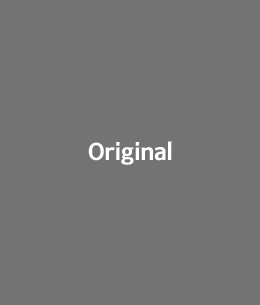
<style>
.page{position:relative;width:260px;height:305px;background:#737373}
.page>*{position:absolute;margin:0}
.t1{font:25px "TTHayanbaramR";letter-spacing:-0.025em;color:#ffffff;scale:0.95 1}
</style>
<div class="page">
<p class="t1" style="left:88px;top:141px;width:84px;height:24px">Original</p>
</div>
